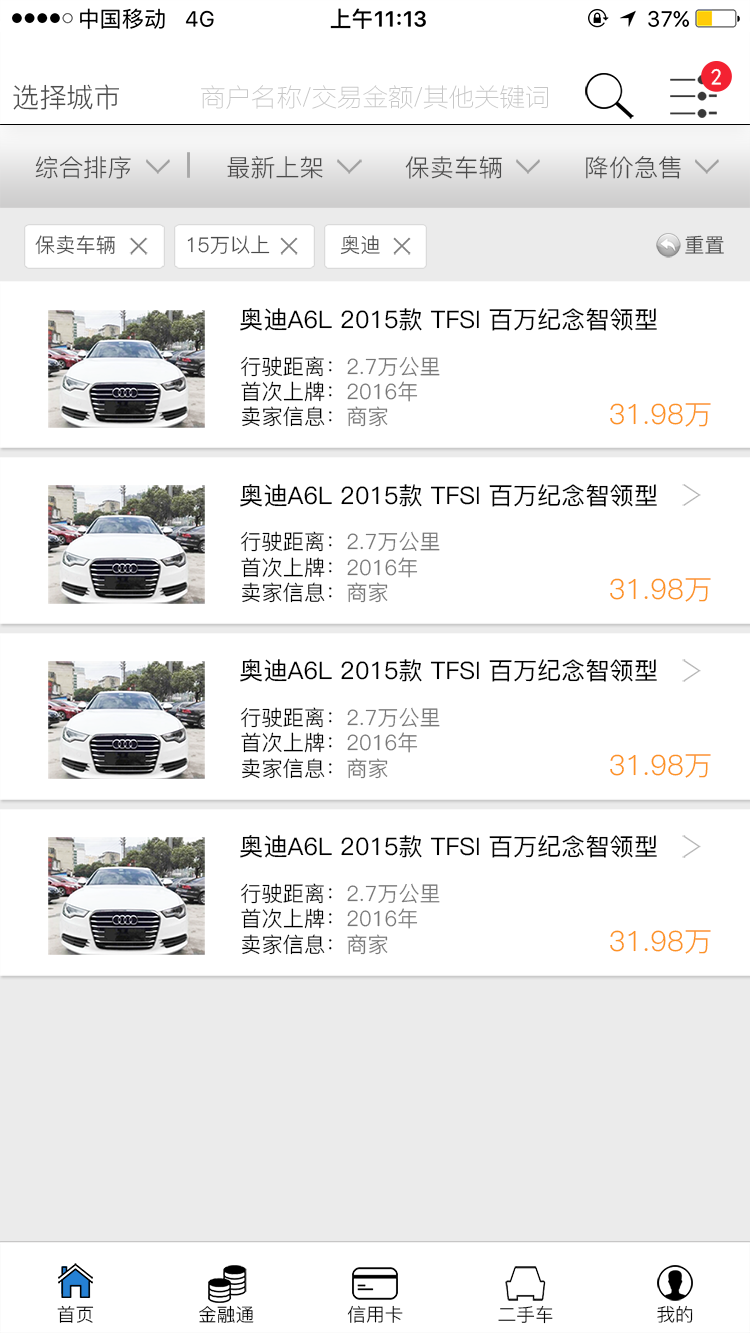
<style>
.page{position:relative;width:750px;height:1333px;background:#ffffff}
.page>*{position:absolute;margin:0}
.t1{font:22.8px "SimHei";color:#ffffff}
.t2{font:27.2px "PingFang-SC-Regular";color:#4c4c4c}
.t3{font:25.5px "FZLTCXHJW--GB1-0";color:#c7c7c7}
.t4{font:24.1px "PingFang-SC-Regular";color:#4a4a4a}
.t5{font:20.1px "PingFang-SC-Regular";color:#4a4a4a}
.t6{font:24.1px "PingFang-SC-Medium";color:#000000}
.t7{font:21.1px "PingFang-SC-Regular";color:#767676}
.t8{font:21.1px "PingFang-SC-Regular";color:#000000}
.t9{font:27.9px "PingFang-SC-Regular";color:#fc9323}
.t10{font:24.2px "PingFang-SC-Medium";color:#000000}
.t11{font:28px "PingFang-SC-Regular";color:#fc9323}
.t12{font:21.2px "PingFang-SC-Regular";color:#767676}
.t13{font:21.2px "PingFang-SC-Regular";color:#000000}
.t14{font:18.4px "PingFang-SC-Regular";color:#000000}
</style>
<div class="page">
<p class="t1" style="left:711px;top:68px;width:10px;height:17px">2</p>
<p class="t2" style="left:13px;top:84px;width:106px;height:26px">选择城市</p>
<p class="t3" style="left:201px;top:85px;width:347px;height:24px">商户名称/交易金额/其他关键词</p>
<p class="t4" style="left:35px;top:156px;width:96px;height:23px">综合排序</p>
<p class="t4" style="left:227px;top:156px;width:96px;height:23px">最新上架</p>
<p class="t4" style="left:405px;top:156px;width:97px;height:23px">保卖车辆</p>
<p class="t4" style="left:586px;top:156px;width:95px;height:23px">降价急售</p>
<p class="t5" style="left:35px;top:235px;width:80px;height:20px">保卖车辆</p>
<p class="t5" style="left:187px;top:235px;width:83px;height:19px">15万以上</p>
<p class="t5" style="left:340px;top:235px;width:40px;height:20px">奥迪</p>
<p class="t5" style="left:685px;top:235px;width:39px;height:19px">重置</p>
<p class="t6" style="left:240px;top:308px;width:417px;height:23px">奥迪A6L 2015款 TFSI 百万纪念智领型</p>
<p class="t7" style="left:241px;top:356px;width:199px;height:71px"><span class="t8">行驶距离：</span>2.7万公里<br><span class="t8">首次上牌：</span>2016年<br><span class="t8">卖家信息：</span>商家</p>
<p class="t9" style="left:610px;top:403px;width:101px;height:24px">31.98万</p>
<p class="t10" style="left:240px;top:484px;width:417px;height:23px">奥迪A6L 2015款 TFSI 百万纪念智领型</p>
<p class="t7" style="left:241px;top:531px;width:199px;height:72px"><span class="t8">行驶距离：</span>2.7万公里<br><span class="t8">首次上牌：</span>2016年<br><span class="t8">卖家信息：</span>商家</p>
<p class="t11" style="left:610px;top:578px;width:101px;height:24px">31.98万</p>
<p class="t10" style="left:240px;top:659px;width:417px;height:23px">奥迪A6L 2015款 TFSI 百万纪念智领型</p>
<p class="t12" style="left:241px;top:707px;width:199px;height:72px"><span class="t13">行驶距离：</span>2.7万公里<br><span class="t13">首次上牌：</span>2016年<br><span class="t13">卖家信息：</span>商家</p>
<p class="t11" style="left:610px;top:754px;width:101px;height:24px">31.98万</p>
<p class="t10" style="left:240px;top:835px;width:417px;height:23px">奥迪A6L 2015款 TFSI 百万纪念智领型</p>
<p class="t12" style="left:241px;top:883px;width:199px;height:72px"><span class="t13">行驶距离：</span>2.7万公里<br><span class="t13">首次上牌：</span>2016年<br><span class="t13">卖家信息：</span>商家</p>
<p class="t11" style="left:610px;top:930px;width:101px;height:24px">31.98万</p>
<p class="t14" style="left:57px;top:1305px;width:37px;height:18px">首页</p>
<p class="t14" style="left:199px;top:1305px;width:55px;height:18px">金融通</p>
<p class="t14" style="left:347px;top:1305px;width:56px;height:18px">信用卡</p>
<p class="t14" style="left:498px;top:1305px;width:55px;height:19px">二手车</p>
<p class="t14" style="left:657px;top:1305px;width:36px;height:18px">我的</p>
</div>
